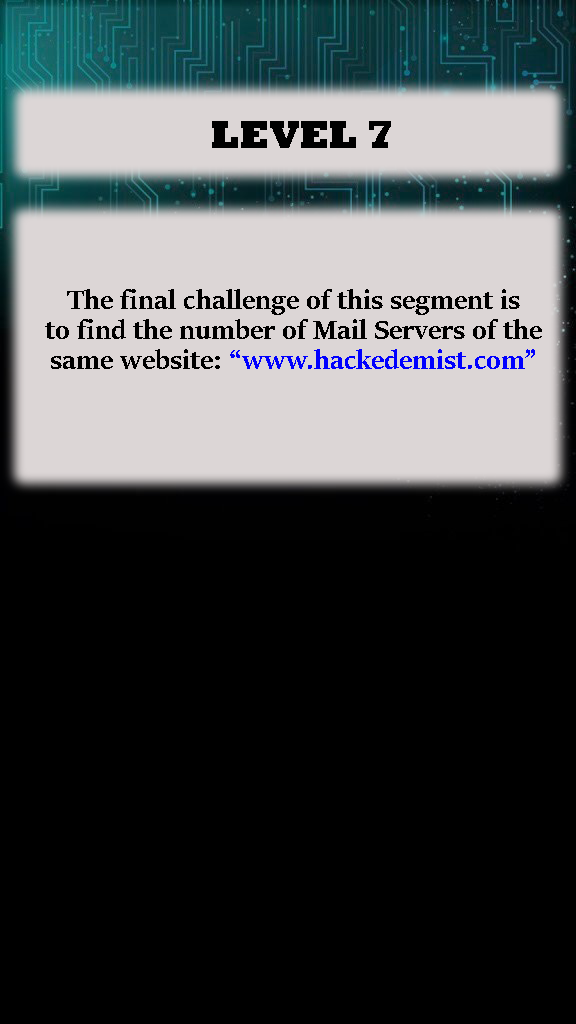
<style>
.page{position:relative;width:576px;height:1024px;background:#000000}
.page>*{position:absolute;margin:0}
.t1{font:40px "Rockwell-ExtraBold";color:#000000}
.t2{font:30px/10px "SitkaBanner-Bold";color:#000000}
.t3{font:30px/10px "SitkaBanner-Bold";color:#0000ff}
</style>
<div class="page">
<p class="t1" style="left:212px;top:121px;width:179px;height:27px">LEVEL 7</p>
<p class="t2" style="left:45px;top:289px;width:497px;height:80px;text-align:center">The final challenge of this segment is <br><br><br>to find the number of Mail Servers of the<br> <br><br>same website: <span class="t3">“www.hackedemist.com”</span></p>
</div>
